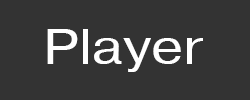
<style>
.page{position:relative;width:250px;height:100px;background:#333333}
.page>*{position:absolute;margin:0}
.t1{font:48px "Helvetica";color:#ffffff;scale:1.2 1}
</style>
<div class="page">
<p class="t1" style="left:47px;top:29px;width:156px;height:43px">Player</p>
</div>
